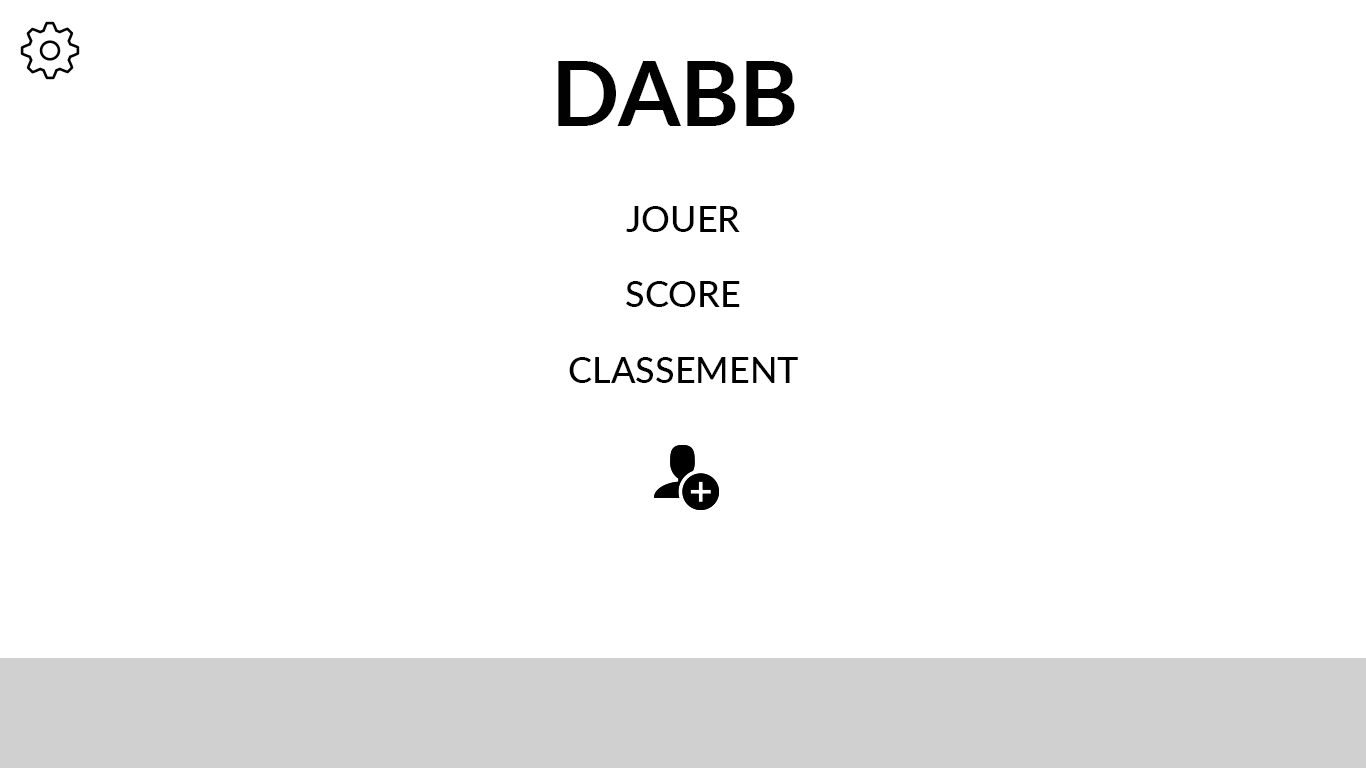
<style>
.page{position:relative;width:1366px;height:768px;background:#ffffff}
.page>*{position:absolute;margin:0}
.t1{font:90px "Lato-Bold";color:#010101}
.t2{font:36px "Lato-Medium";color:#000000}
</style>
<div class="page">
<p class="t1" style="left:558px;top:61px;width:237px;height:65px">DABB</p>
<p class="t2" style="left:626px;top:206px;width:114px;height:26px">JOUER</p>
<p class="t2" style="left:626px;top:281px;width:114px;height:26px">SCORE</p>
<p class="t2" style="left:569px;top:357px;width:229px;height:26px">CLASSEMENT</p>
</div>
